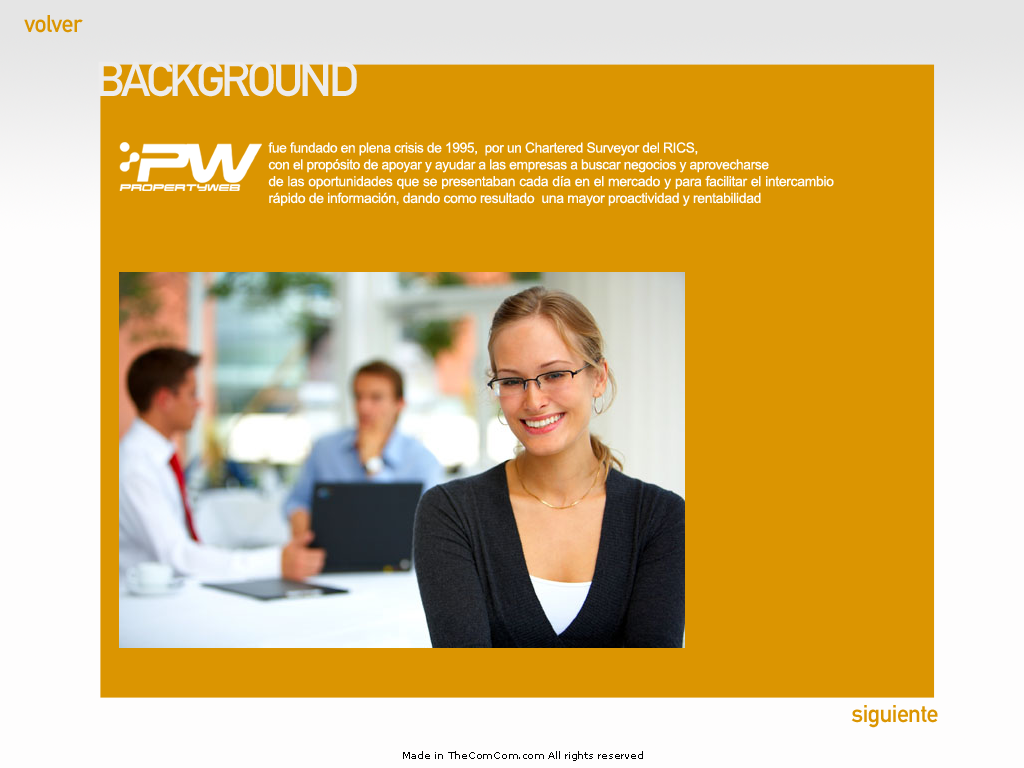
<style>
.page{position:relative;width:1024px;height:768px;background:#db9501}
.page>*{position:absolute;margin:0}
.t1{font:24px "DINMittelschriftStd";letter-spacing:-0.025em;color:#db9501}
.t2{font:48px "DINMittelschriftStd";letter-spacing:-0.075em;color:#edecec}
.t3{font:14px "ArialMT";letter-spacing:-0.025em;color:#fefdfd}
.t4{font:10px "MSReferenceSansSerif";letter-spacing:-0.025em;color:#010101}
</style>
<div class="page">
<p class="t1" style="left:24px;top:15px;width:59px;height:18px">volver</p>
<p class="t2" style="left:98px;top:61px;width:259px;height:36px">BACKGROUND</p>
<p class="t3" style="left:268px;top:142px;width:566px;height:64px;text-align:justify">fue fundado en plena crisis de 1995,  por un Chartered Surveyor del RICS,     con el propósito de apoyar y ayudar a las empresas a buscar negocios y aprovecharse   de las oportunidades que se presentaban cada día en el mercado y para facilitar el intercambio rápido de información, dando como resultado  una mayor proactividad y rentabilidad</p>
<p class="t1" style="left:851px;top:705px;width:87px;height:23px">siguiente</p>
<p class="t4" style="left:403px;top:751px;width:240px;height:10px">Made in TheComCom.com All rights reserved</p>
</div>
